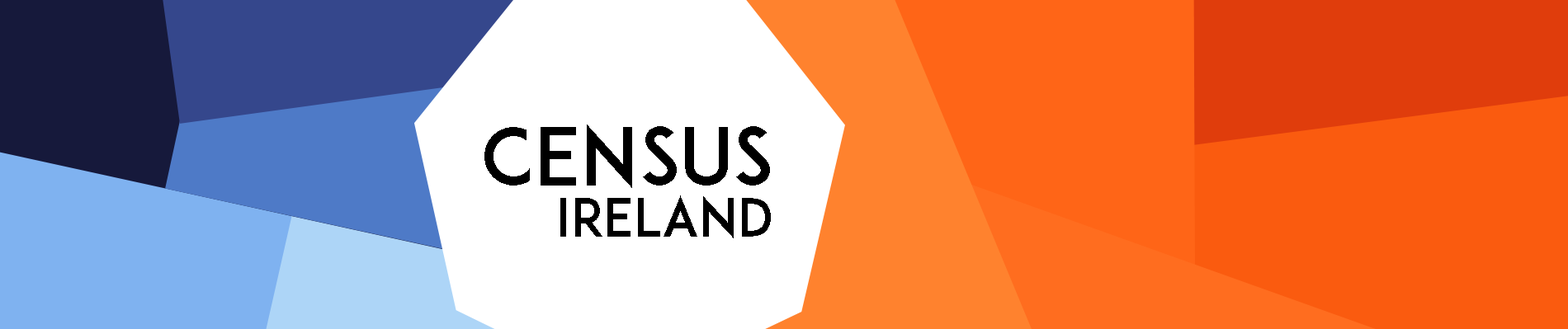
<style>
.page{position:relative;width:1568px;height:329px;background:#ffffff}
.page>*{position:absolute;margin:0}
.t1{font:79.2px "ADAM.CGPRO";color:#000000}
.t2{font:52.8px "ADAM.CGPRO";color:#000000}
</style>
<div class="page">
<p class="t1" style="left:484px;top:125px;width:286px;height:63px">census</p>
<p class="t2" style="left:560px;top:196px;width:211px;height:43px">ireland</p>
</div>
